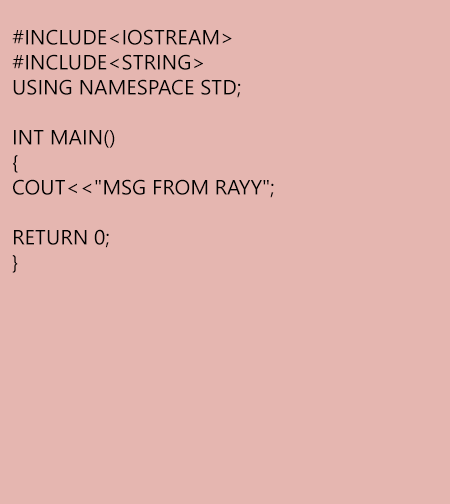
<style>
.page{position:relative;width:450px;height:504px;background:#e5b6b0}
.page>*{position:absolute;margin:0}
.t1{font:20.8px "NirmalaUI";color:#000000;text-transform:uppercase}
</style>
<div class="page">
<p class="t1" style="left:12px;top:29px;width:262px;height:244px">#include&lt;iostream&gt;<br>#include&lt;string&gt;<br>using namespace std;<br><br>int main()<br>{<br>cout&lt;&lt;"Msg from rayy";<br><br>return 0;<br>}</p>
</div>
